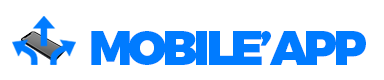
<style>
.page{position:relative;width:384px;height:80px;background:#ffffff}
.page>*{position:absolute;margin:0}
.t1{font:48px "Montserrat-Black";letter-spacing:-0.075em;color:#007bff;text-transform:uppercase}
</style>
<div class="page">
<p class="t1" style="left:91px;top:31px;width:275px;height:34px">mobile’app</p>
</div>
